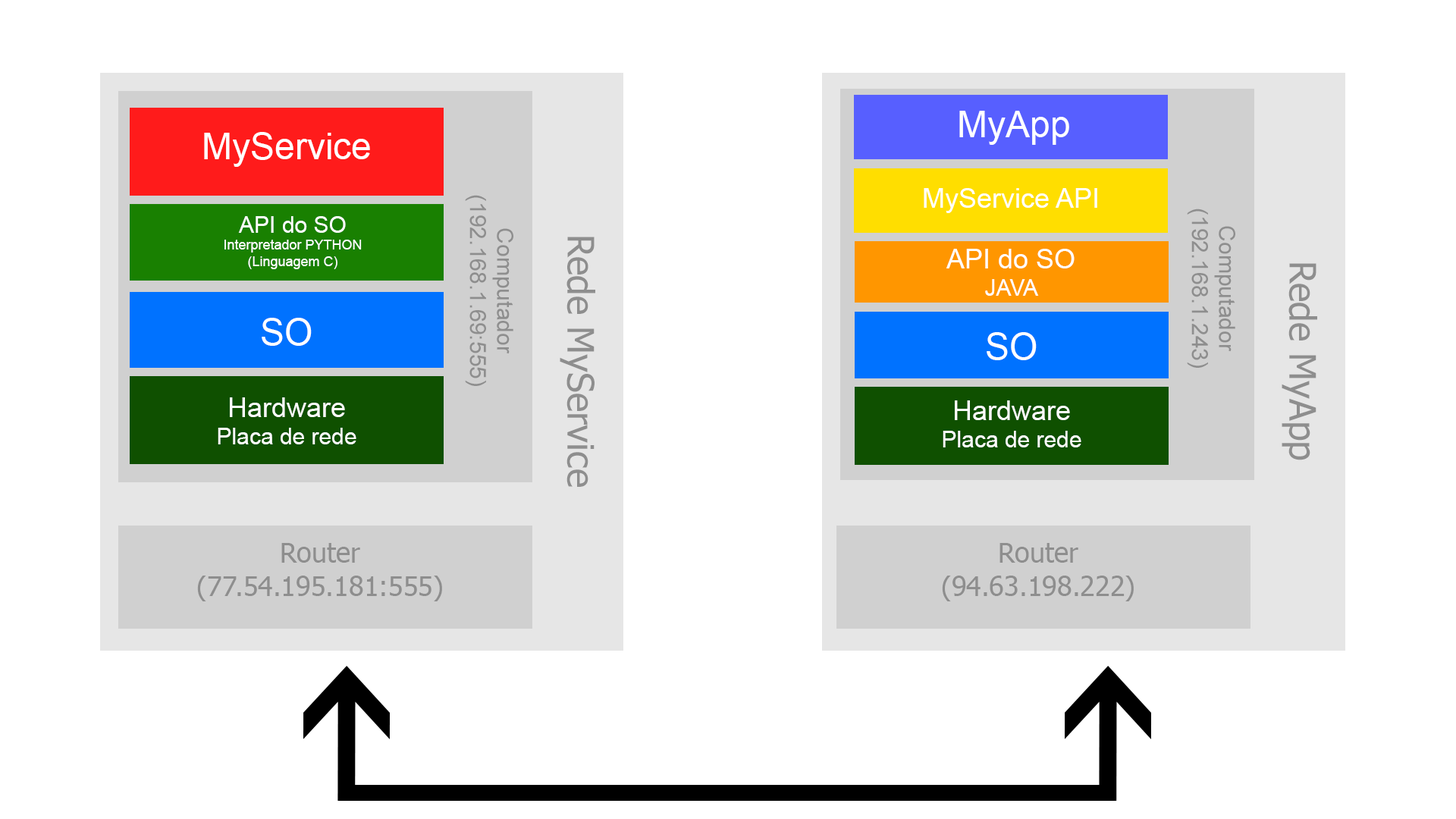
<style>
.page{position:relative;width:1456px;height:819px;background:#ffffff}
.page>*{position:absolute;margin:0}
.t1{font:36.4px "ArialMT";color:#ffffff}
.t2{font:22.6px "ArialMT";color:#8e8e8e}
.t3{font:27.3px "ArialMT";color:#ffffff}
.t4{font:13.6px "ArialMT";color:#ffffff}
.t5{font:22.7px "ArialMT";color:#ffffff}
.t6{font:36.4px "Tahoma";color:#8e8e8e}
.t7{font:27.3px "Tahoma";color:#8e8e8e}
</style>
<div class="page">
<p class="t1" style="left:959px;top:111px;width:110px;height:34px">MyApp</p>
<p class="t1" style="left:204px;top:132px;width:166px;height:35px">MyService</p>
<p class="t2" style="left:465px;top:195px;width:48px;height:191px;text-align:center;rotate:90deg">Computador<br>(192.168.1.69:555)</p>
<p class="t3" style="left:924px;top:188px;width:173px;height:25px">MyService API</p>
<p class="t2" style="left:1187px;top:209px;width:48px;height:159px;text-align:center;rotate:90deg">Computador<br>(192.168.1.243)</p>
<p class="t4" style="left:224px;top:216px;width:138px;height:53px;text-align:center"><span class="t5">API do SO<br></span>Interpretador PYTHON <br>(Linguagem C)</p>
<p class="t6" style="left:560px;top:237px;width:35px;height:250px;rotate:90deg">Rede MyService</p>
<p class="t3" style="left:946px;top:249px;width:129px;height:47px;text-align:center">API do SO<br><span class="t5">JAVA</span></p>
<p class="t6" style="left:1282px;top:263px;width:35px;height:197px;rotate:90deg">Rede MyApp</p>
<p class="t1" style="left:262px;top:318px;width:50px;height:28px">SO</p>
<p class="t1" style="left:987px;top:332px;width:50px;height:28px">SO</p>
<p class="t5" style="left:218px;top:397px;width:138px;height:47px;text-align:center"><span class="t3">Hardware<br></span>Placa de rede</p>
<p class="t5" style="left:943px;top:400px;width:138px;height:47px;text-align:center"><span class="t3">Hardware<br></span>Placa de rede</p>
<p class="t7" style="left:197px;top:543px;width:245px;height:58px;text-align:center">Router<br>(77.54.195.181:555)</p>
<p class="t7" style="left:942px;top:543px;width:192px;height:58px;text-align:center">Router<br>(94.63.198.222)</p>
</div>
